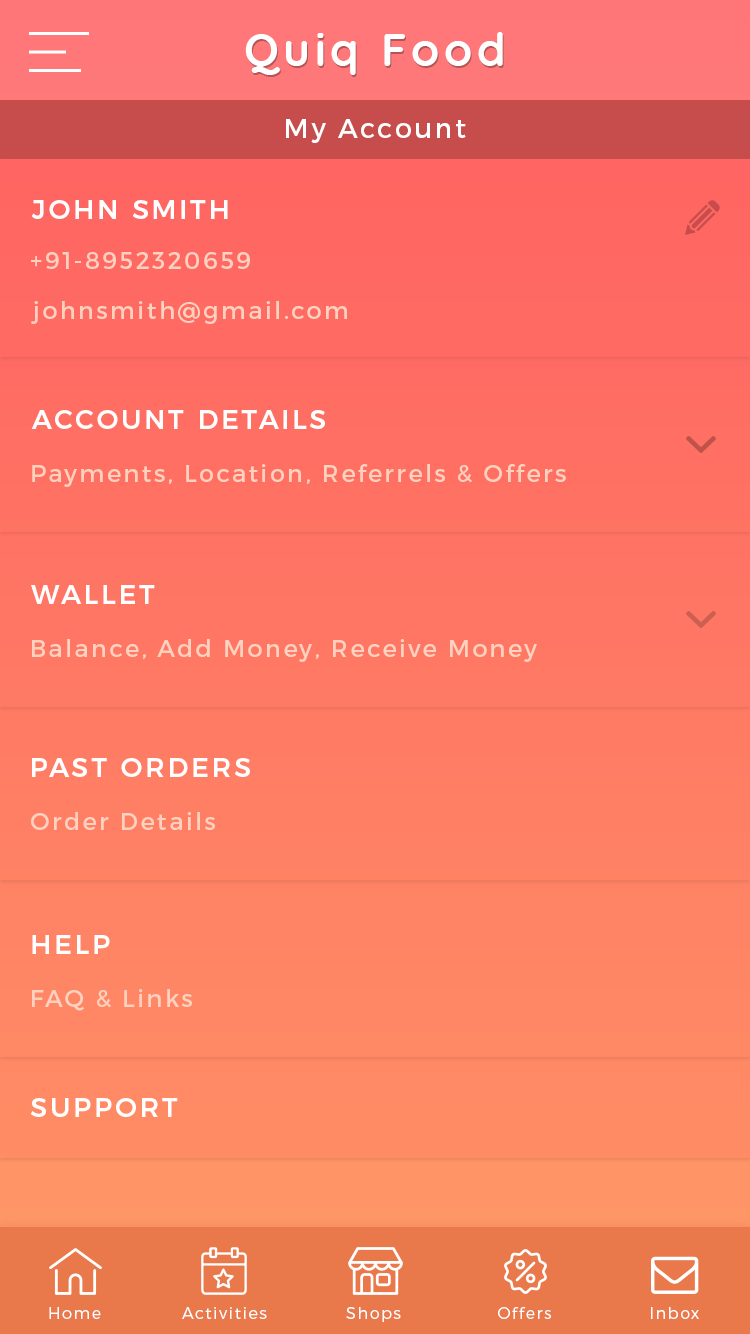
<style>
.page{position:relative;width:750px;height:1334px}
.page>*{position:absolute;margin:0}
.t1{font:46px "Quicksand-Bold";letter-spacing:0.1em;color:#ffffff}
.t2{font:27px "Montserrat-Regular";letter-spacing:0.1em;color:#ffffff}
.t3{font:27px "Montserrat-Medium";letter-spacing:0.1em;color:#ffffff;text-transform:uppercase}
.t4{font:24px "Montserrat-Regular";letter-spacing:0.1em;color:#ffd1bf}
.t5{font:16px "Montserrat-Light";letter-spacing:0.1em;color:#ffffff}
</style>
<div class="page">
<p class="t1" style="left:245px;top:32px;width:258px;height:43px">Quiq Food</p>
<p class="t2" style="left:286px;top:119px;width:180px;height:24px">My Account</p>
<p class="t3" style="left:31px;top:200px;width:197px;height:19px">John Smith</p>
<p class="t4" style="left:31px;top:252px;width:219px;height:17px">+91-8952320659</p>
<p class="t4" style="left:31px;top:301px;width:316px;height:23px">johnsmith@gmail.com</p>
<p class="t3" style="left:31px;top:410px;width:294px;height:19px">Account Details</p>
<p class="t4" style="left:32px;top:464px;width:534px;height:23px">Payments, Location, Referrels &amp; Offers</p>
<p class="t3" style="left:31px;top:585px;width:124px;height:19px">Wallet</p>
<p class="t4" style="left:32px;top:639px;width:505px;height:23px">Balance, Add Money, Receive Money</p>
<p class="t3" style="left:32px;top:758px;width:218px;height:19px">Past Orders</p>
<p class="t4" style="left:31px;top:812px;width:184px;height:18px">Order Details</p>
<p class="t3" style="left:32px;top:935px;width:78px;height:19px">Help</p>
<p class="t4" style="left:32px;top:989px;width:160px;height:22px">FAQ &amp; Links</p>
<p class="t3" style="left:31px;top:1098px;width:147px;height:19px">Support</p>
<p class="t5" style="left:49px;top:1307px;width:52px;height:12px">Home</p>
<p class="t5" style="left:182px;top:1307px;width:85px;height:12px">Activities</p>
<p class="t5" style="left:346px;top:1307px;width:55px;height:15px">Shops</p>
<p class="t5" style="left:498px;top:1307px;width:53px;height:12px">Offers</p>
<p class="t5" style="left:651px;top:1307px;width:48px;height:12px">Inbox</p>
</div>
